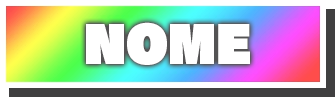
<style>
.page{position:relative;width:336px;height:98px}
.page>*{position:absolute;margin:0}
.t1{font:48px "RaglanPunchStd-UB";letter-spacing:0.004em;color:#ffffff}
</style>
<div class="page">
<p class="t1" style="left:86px;top:22px;width:164px;height:43px">NOME</p>
</div>
